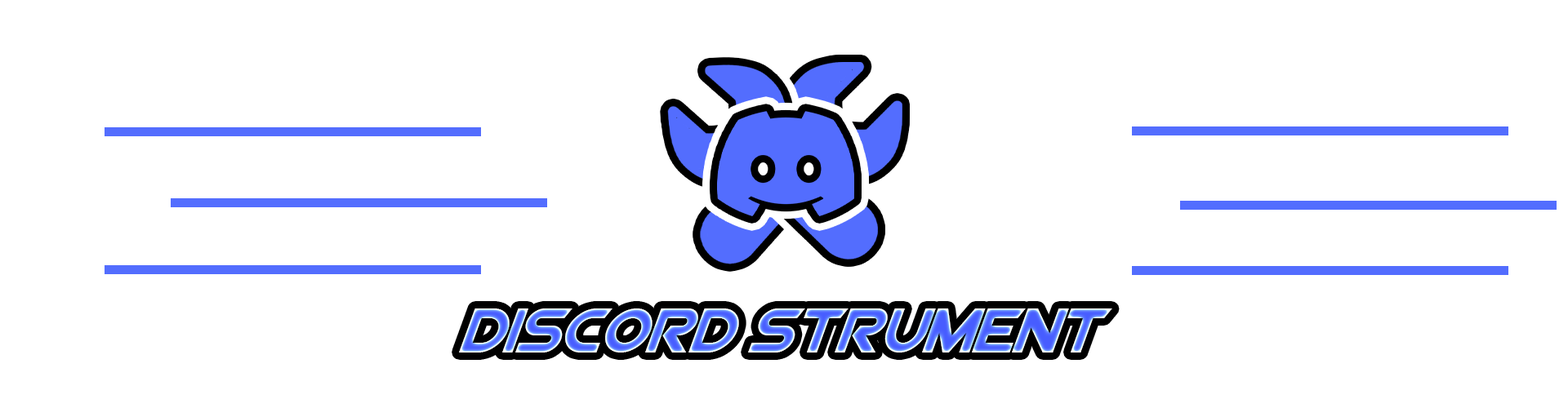
<style>
.page{position:relative;width:1568px;height:408px;background:#ffffff}
.page>*{position:absolute;margin:0}
.t1{font:63px "ViperSquadronSolidItalic"}
</style>
<div class="page">
<p class="t1" style="left:459px;top:309px;width:653px;height:44px">discord strument</p>
</div>
